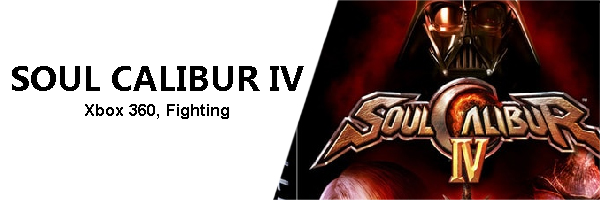
<style>
.page{position:relative;width:600px;height:200px;background:#ffffff}
.page>*{position:absolute;margin:0}
.t1{font:16.7px/25px "Arial-BoldMT";color:#000000}
.t2{font:33.3px/25px "MicrosoftYaHei-Bold";color:#000000}
</style>
<div class="page">
<p class="t1" style="left:12px;top:66px;width:292px;height:53px;text-align:center"><span class="t2">SOUL CALIBUR IV<br></span>Xbox 360, Fighting</p>
</div>
